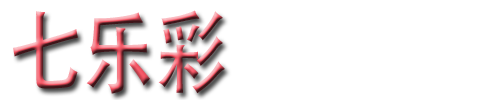
<style>
.page{position:relative;width:500px;height:100px;background:#ffffff}
.page>*{position:absolute;margin:0}
.t1{font:92px "AdobeHeitiStd-Regular";scale:0.79 1}
</style>
<div class="page">
<p class="t1" style="left:13px;top:10px;width:212px;height:84px">七乐彩</p>
</div>
